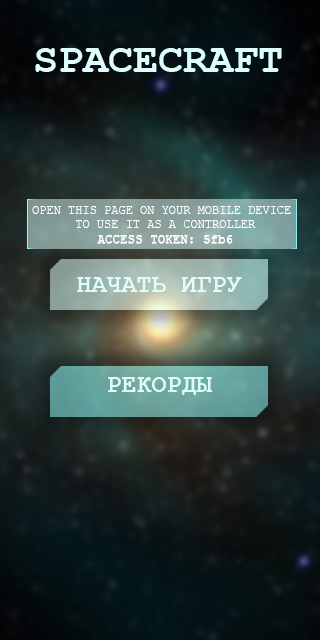
<style>
.page{position:relative;width:320px;height:640px}
.page>*{position:absolute;margin:0}
.t1{font:41.7px "CourierNewPS-BoldMT";color:#ddfefd}
.t2{font:12px "CourierNewPSMT";color:#ffffff}
.t3{font:12px "CourierNewPSMT";color:#ffffff;font-weight:bold}
.t4{font:25px "CourierNewPS-BoldMT";color:#ddfefd}
</style>
<div class="page">
<p class="t1" style="left:35px;top:48px;width:247px;height:24px">SPACECRAFT</p>
<p class="t2" style="left:32px;top:206px;width:259px;height:38px;text-align:center">OPEN THIS PAGE ON YOUR MOBILE DEVICE <br>TO USE IT AS A CONTROLLER<br><span class="t3">ACCESS TOKEN: 5fb6</span></p>
<p class="t4" style="left:77px;top:277px;width:165px;height:15px">НАЧАТЬ ИГРУ</p>
<p class="t4" style="left:108px;top:377px;width:105px;height:18px">РЕКОРДЫ</p>
</div>
